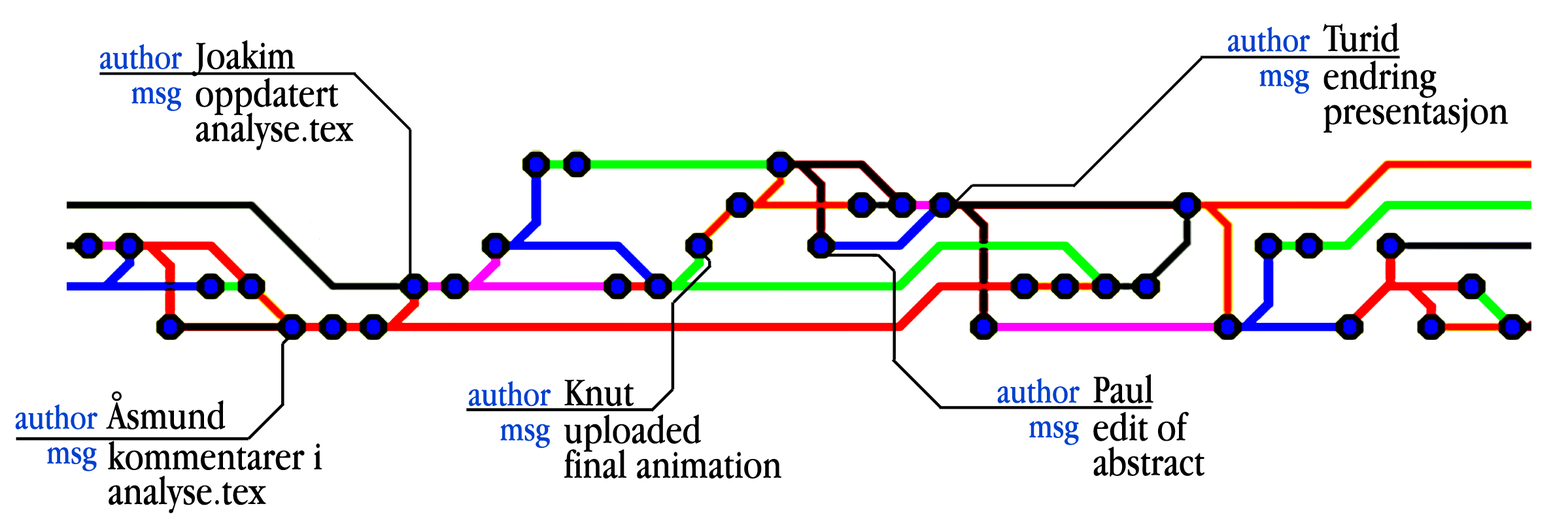
<style>
.page{position:relative;width:1568px;height:523px;background:#ffffff}
.page>*{position:absolute;margin:0}
.t1{font:34.8px "AppleGaramond";letter-spacing:0.002em;color:#0140cf}
.t2{font:40.6px "AppleGaramond";letter-spacing:0.002em;color:#000000}
.t3{font:40.6px/34.8px "AppleGaramond";letter-spacing:0.002em;color:#000000}
</style>
<div class="page">
<p class="t1" style="left:1228px;top:27px;width:82px;height:25px">author</p>
<p class="t2" style="left:1323px;top:23px;width:76px;height:29px">Turid</p>
<p class="t2" style="left:192px;top:40px;width:103px;height:37px">Joakim</p>
<p class="t1" style="left:100px;top:44px;width:82px;height:25px">author</p>
<p class="t3" style="left:1323px;top:60px;width:185px;height:73px">endring<br>presentasjon</p>
<p class="t3" style="left:196px;top:78px;width:158px;height:72px">oppdatert<br>analyse.tex</p>
<p class="t1" style="left:1259px;top:69px;width:50px;height:25px">msg</p>
<p class="t1" style="left:131px;top:87px;width:50px;height:24px">msg</p>
<p class="t1" style="left:997px;top:378px;width:83px;height:25px">author</p>
<p class="t2" style="left:1093px;top:374px;width:60px;height:29px">Paul</p>
<p class="t1" style="left:469px;top:381px;width:82px;height:26px">author</p>
<p class="t2" style="left:564px;top:379px;width:70px;height:28px">Knut</p>
<p class="t2" style="left:106px;top:391px;width:120px;height:39px">Åsmund</p>
<p class="t1" style="left:15px;top:404px;width:82px;height:26px">author</p>
<p class="t3" style="left:1093px;top:412px;width:111px;height:65px">edit of<br>abstract</p>
<p class="t1" style="left:500px;top:424px;width:50px;height:25px">msg</p>
<p class="t3" style="left:564px;top:415px;width:217px;height:64px">uploaded<br>final animation</p>
<p class="t1" style="left:1029px;top:421px;width:50px;height:24px">msg</p>
<p class="t1" style="left:47px;top:447px;width:50px;height:24px">msg</p>
<p class="t3" style="left:108px;top:441px;width:214px;height:72px">kommentarer i <br>analyse.tex</p>
</div>
